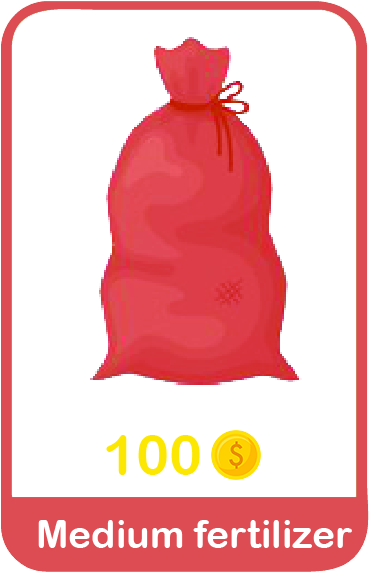
<style>
.page{position:relative;width:370px;height:572px;background:#ffffff}
.page>*{position:absolute;margin:0}
.t1{font:55.6px "ArialRoundedMTBold";color:#fbe702}
.t2{font:38.9px "ArialRoundedMTBold";color:#ffffff}
</style>
<div class="page">
<p class="t1" style="left:106px;top:435px;width:94px;height:40px">100</p>
<p class="t2" style="left:38px;top:520px;width:314px;height:28px">Medium fertilizer</p>
</div>
